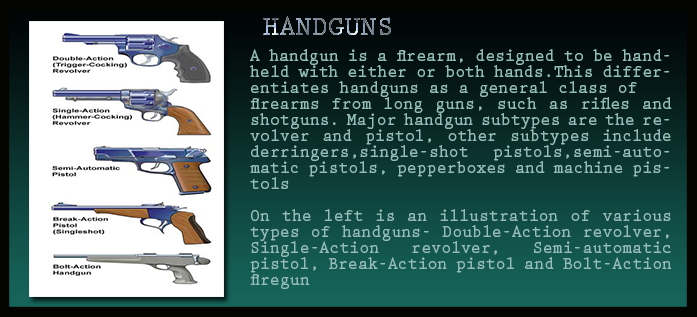
<style>
.page{position:relative;width:697px;height:317px}
.page>*{position:absolute;margin:0}
.t1{font:28.6px "PrestigeEliteStd-Bd";letter-spacing:0.002em;scale:0.95 1}
.t2{font:17.6px/16px "PrestigeEliteStd-Bd";letter-spacing:0.002em;color:#93bdb8;scale:0.94 1}
</style>
<div class="page">
<p class="t1" style="left:263px;top:16px;width:128px;height:19px">HANDGUNS</p>
<p class="t2" style="left:250px;top:49px;width:422px;height:240px;text-align:justify">A handgun is a firearm, designed to be handheld with either or both hands.This differentiates handguns as a general class of <br>firearms from long guns, such as rifles and shotguns. Major handgun subtypes are the revolver and pistol, other subtypes include derringers,single-shot pistols,semi-automatic pistols, pepperboxes and machine pistols<br><br>On the left is an illustration of various types of handguns- Double-Action revolver, Single-Action revolver, Semi-automatic pistol, Break-Action pistol and Bolt-Action<br>firegun</p>
</div>
